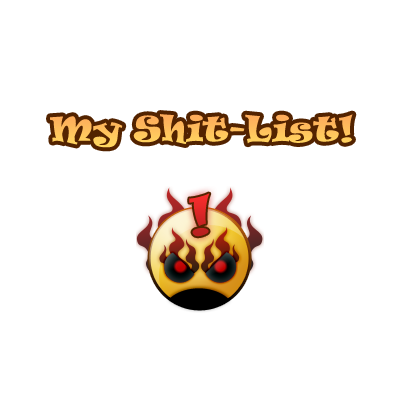
<style>
.page{position:relative;width:400px;height:400px;background:#ffffff}
.page>*{position:absolute;margin:0}
.t1{font:33px "Ravie";color:#fec15d}
</style>
<div class="page">
<p class="t1" style="left:50px;top:114px;width:303px;height:34px">My Shit-List!</p>
</div>
